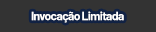
<style>
.page{position:relative;width:156px;height:32px;background:#333333}
.page>*{position:absolute;margin:0}
.t1{font:12px "Barlow-Bold";letter-spacing:-0.05em;color:#ffffff}
</style>
<div class="page">
<p class="t1" style="left:31px;top:11px;width:93px;height:12px">Invocação Limitada</p>
</div>
